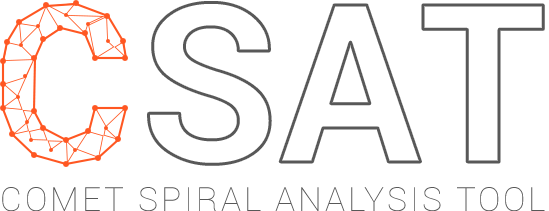
<style>
.page{position:relative;width:549px;height:211px;background:#ffffff}
.page>*{position:absolute;margin:0}
.t1{font:33.4px "Roboto-Thin";letter-spacing:0.09em;color:#585858}
</style>
<div class="page">
<p class="t1" style="left:2px;top:187px;width:543px;height:25px">COMET SPIRAL ANALYSIS TOOL</p>
</div>
